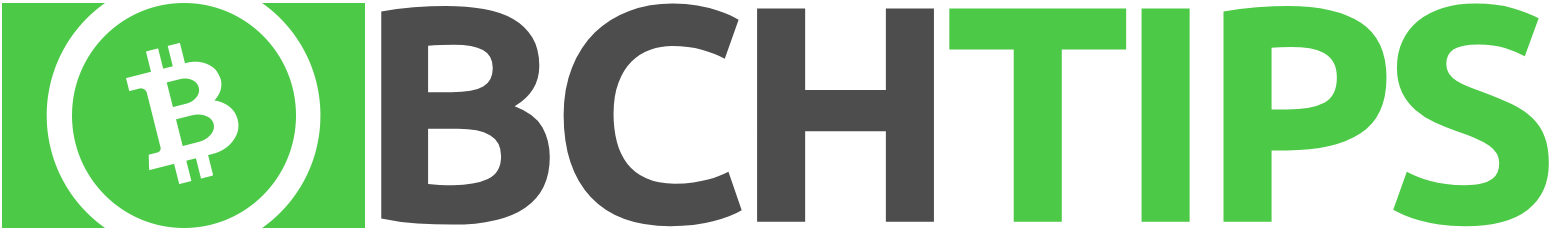
<style>
.page{position:relative;width:1550px;height:230px;background:#ffffff}
.page>*{position:absolute;margin:0}
.t1{font:307.9px "Ubuntu-Bold";letter-spacing:-0.05em;color:#4cca47}
.t2{font:307.9px "Ubuntu-Bold";letter-spacing:-0.05em;color:#4d4d4d}
</style>
<div class="page">
<p class="t1" style="left:381px;top:3px;width:1168px;height:224px"><span class="t2">BCH</span>TIPS</p>
</div>
